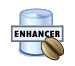
<style>
.page{position:relative;width:75px;height:66px;background:#ffffff}
.page>*{position:absolute;margin:0}
.t1{font:9px "Humanist521BT-XtraBoldCondensed";letter-spacing:0.05em;color:#000000;font-variant:small-caps}
</style>
<div class="page">
<p class="t1" style="left:14px;top:30px;width:46px;height:7px">ENHANCER</p>
</div>
